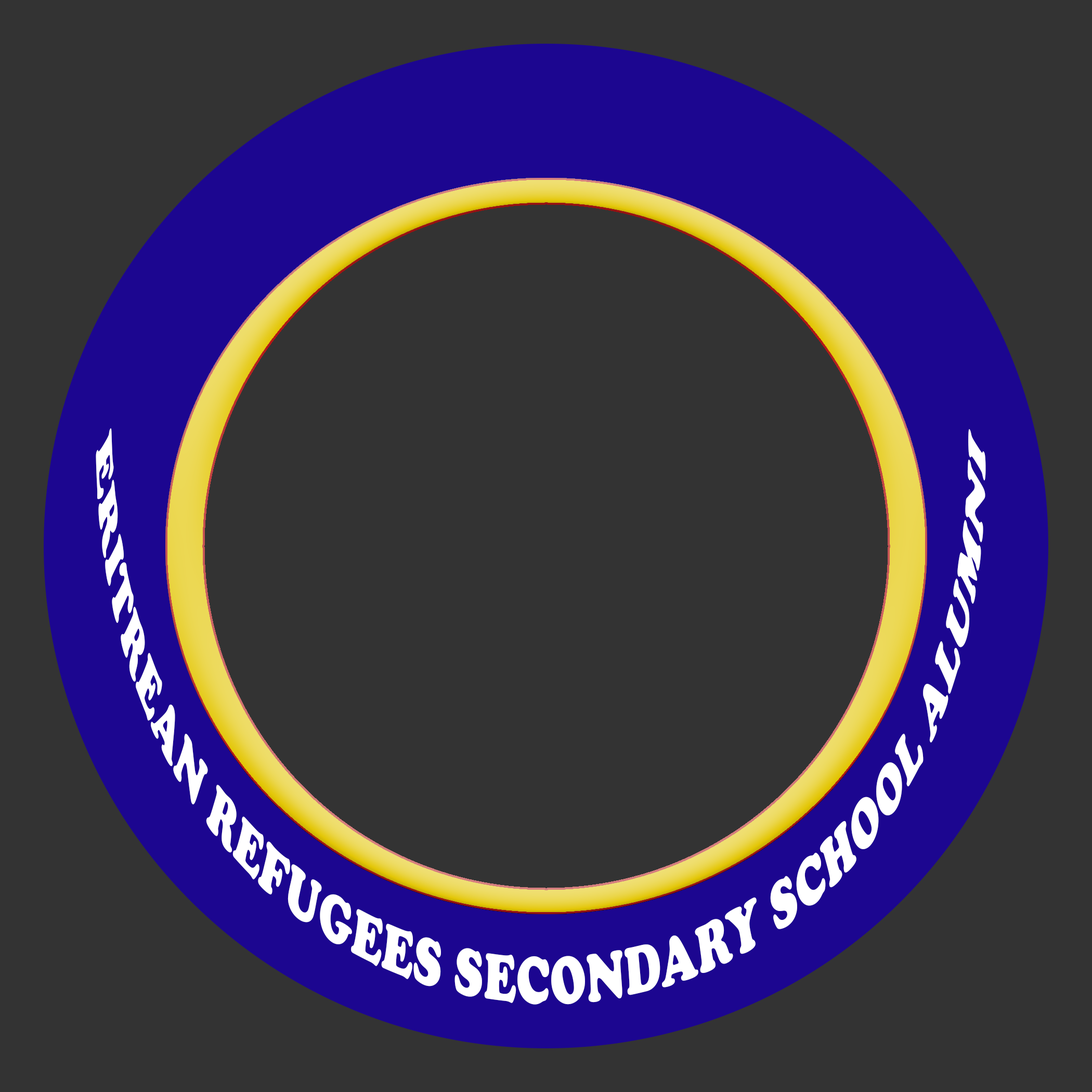
<style>
.page{position:relative;width:1092px;height:1092px;background:#333333}
.page>*{position:absolute;margin:0}
.t1{font:38.8px "CooperBlack";color:#ffffff;scale:0.8 1}
</style>
<div class="page">
<p class="t1" style="left:96px;top:428px;width:890px;height:577px">ERITREAN REFUGEES SECONDARY SCHOOL ALUMNI</p>
</div>
